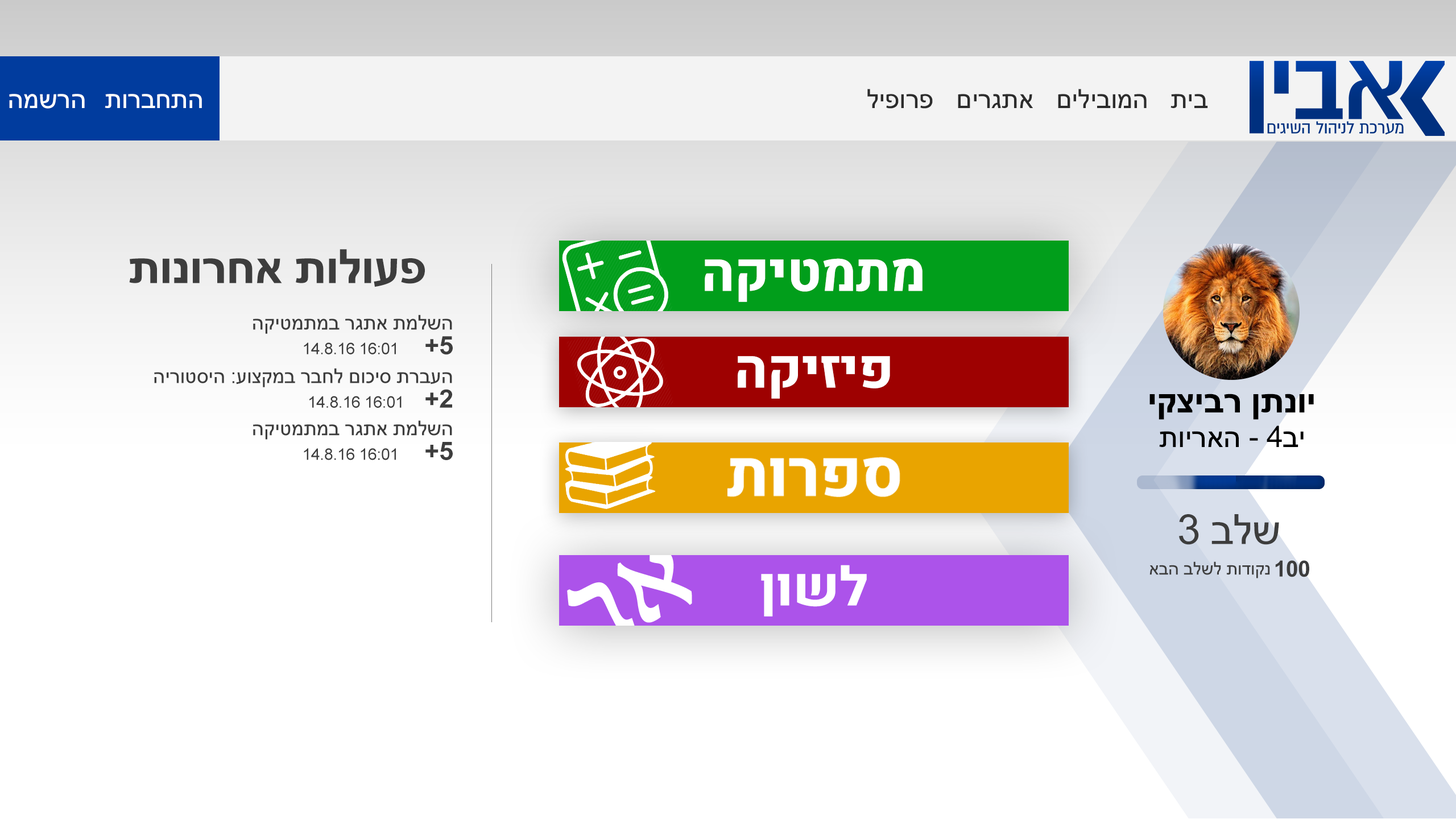
<style>
.page{position:relative;width:1456px;height:819px;background:#ffffff}
.page>*{position:absolute;margin:0}
.t1{font:26.6px "ArialMT";letter-spacing:-0.01em;color:#2c2c2c}
.t2{font:26.6px "ArialMT";letter-spacing:-0.01em;color:#ffffff}
.t3{font:47.2px "Arial-BoldMT";letter-spacing:-0.01em;color:#3d3d3d}
.t4{font:53.6px "Heebo-ExtraBold";letter-spacing:-0.01em;color:#ffffff}
.t5{font:20.4px/13px "ArialMT";letter-spacing:-0.01em;color:#3d3d3d}
.t6{font:16.1px/13px "ArialMT";letter-spacing:-0.01em;color:#3d3d3d}
.t7{font:25.5px/13px "Arial-BoldMT";letter-spacing:-0.01em;color:#3d3d3d}
.t8{font:35.3px "Arial-BoldMT";letter-spacing:-0.01em;color:#000000}
.t9{font:29.7px "ArialMT";letter-spacing:-0.01em;color:#000000}
.t10{font:41.6px "ArialMT";letter-spacing:-0.01em;color:#3d3d3d}
.t11{font:17.9px "ArialMT";letter-spacing:-0.01em;color:#3d3d3d}
.t12{font:22.1px "Arial-BoldMT";letter-spacing:-0.01em;color:#3d3d3d}
</style>
<div class="page">
<p class="t1" style="left:867px;top:89px;width:66px;height:20px">פרופיל</p>
<p class="t1" style="left:1058px;top:89px;width:89px;height:19px">המובילים</p>
<p class="t2" style="left:9px;top:94px;width:76px;height:15px">הרשמה</p>
<p class="t2" style="left:105px;top:94px;width:97px;height:14px">התחברות</p>
<p class="t1" style="left:958px;top:94px;width:75px;height:14px">אתגרים</p>
<p class="t1" style="left:1170px;top:94px;width:38px;height:14px">בית</p>
<p class="t3" style="left:129px;top:249px;width:296px;height:38px">פעולות אחרונות</p>
<p class="t4" style="left:705px;top:258px;width:218px;height:44px">מתמטיקה</p>
<p class="t5" style="left:253px;top:315px;width:200px;height:40px;text-align:right">השלמת אתגר במתמטיקה<br>    <span class="t6">14.8.16 16:01      </span><span class="t7">+5</span></p>
<p class="t4" style="left:738px;top:356px;width:152px;height:43px">פיזיקה</p>
<p class="t5" style="left:154px;top:368px;width:298px;height:40px;text-align:right">העברת סיכום לחבר במקצוע: היסטוריה<br><span class="t6">14.8.16 16:01</span><span class="t7">   +2</span></p>
<p class="t8" style="left:1149px;top:394px;width:165px;height:26px">יונתן רביצקי</p>
<p class="t5" style="left:253px;top:420px;width:200px;height:40px;text-align:right">השלמת אתגר במתמטיקה<br> <span class="t6">14.8.16 16:01      </span><span class="t7">+5</span></p>
<p class="t9" style="left:1159px;top:425px;width:145px;height:22px">יב4 - האריות</p>
<p class="t10" style="left:1179px;top:514px;width:100px;height:31px">שלב 3</p>
<p class="t4" style="left:761px;top:565px;width:106px;height:52px">לשון</p>
<p class="t11" style="left:1149px;top:561px;width:121px;height:17px">נקודות לשלב הבא</p>
<p class="t12" style="left:1275px;top:560px;width:34px;height:17px">100</p>
</div>
